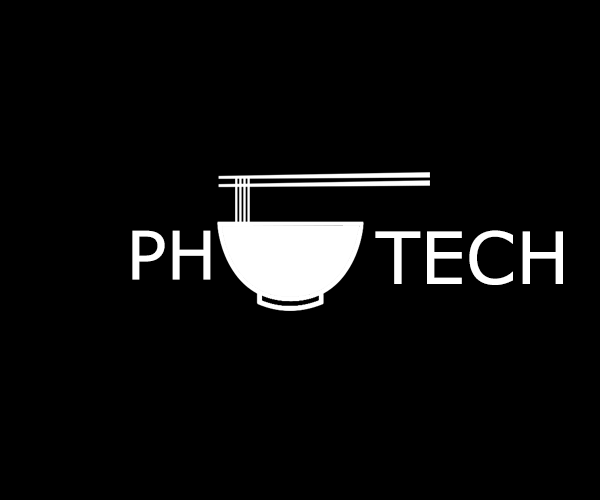
<style>
.page{position:relative;width:600px;height:500px;background:#000000}
.page>*{position:absolute;margin:0}
.t1{font:66.8px "Verdana";color:#ffffff;text-transform:uppercase}
.t2{font:72px "Verdana";color:#ffffff;text-transform:uppercase}
</style>
<div class="page">
<p class="t1" style="left:132px;top:230px;width:79px;height:50px">ph</p>
<p class="t2" style="left:375px;top:230px;width:188px;height:55px">Tech</p>
</div>
